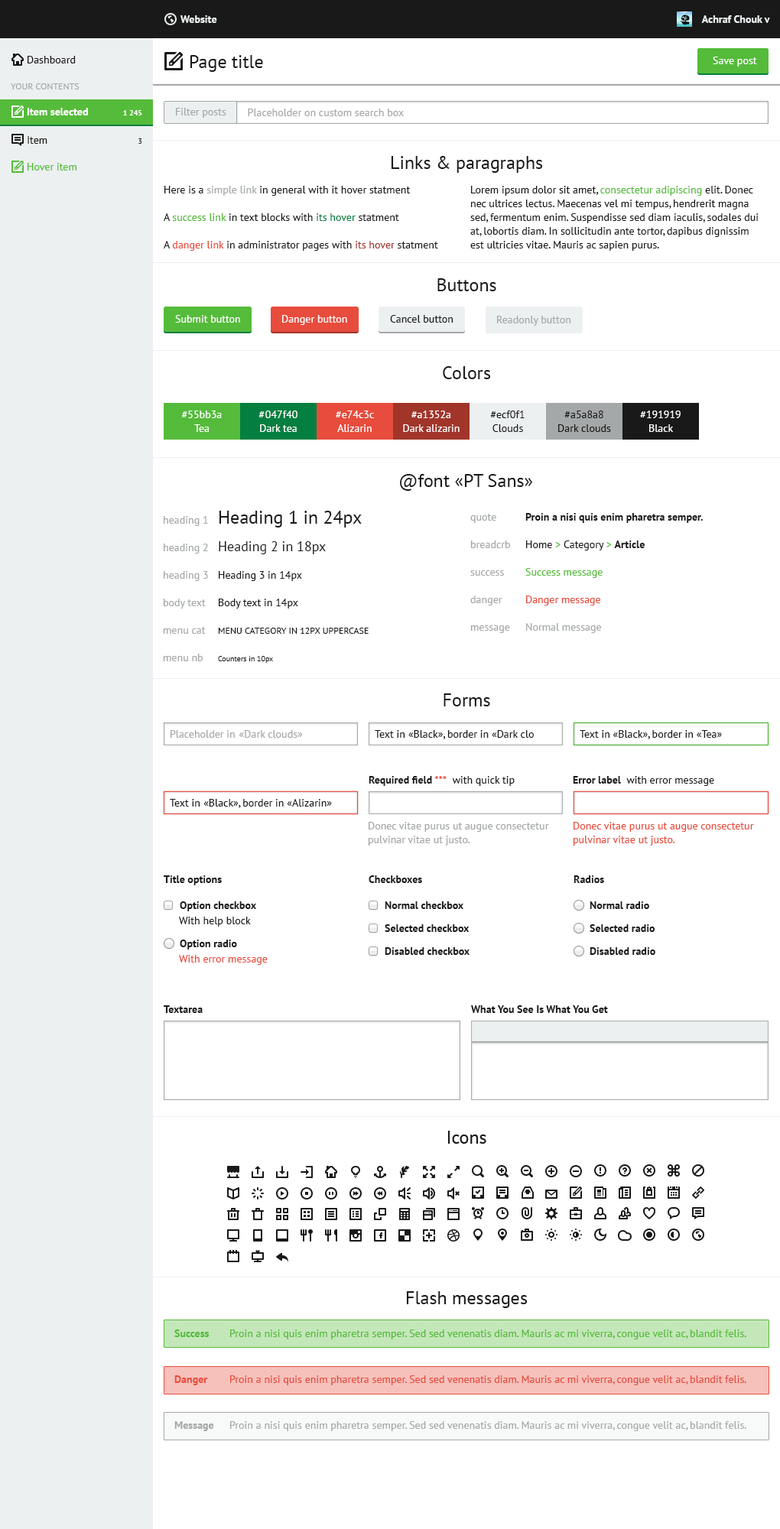
<style>
.page{position:relative;width:780px;height:1529px;background:#ffffff}
.page>*{position:absolute;margin:0}
.t1{font:10.7px "PTSans-Bold";color:#ecf0f1}
.t2{font:10.7px "PTSans-Regular";color:#191919}
.t3{font:18.3px "PTSans-Regular";color:#191919}
.t4{font:10.7px "PTSans-Regular";color:#ffffff}
.t5{font:9.2px "PTSans-Regular";color:#a5a8a8;text-transform:uppercase}
.t6{font:10.7px "PTSans-Bold";color:#ffffff}
.t7{font:7.6px "PTSans-Bold";color:#ffffff}
.t8{font:10.7px "PTSans-Regular";color:#a5a8a8}
.t9{font:7.6px "PTSans-Regular";color:#191919}
.t10{font:10.7px "PTSans-Regular";color:#55bb3a}
.t11{font:10.7px/13.8px "PTSans-Regular";color:#191919}
.t12{font:10.7px/13.8px "PTSans-Regular";color:#a5a8a8}
.t13{font:10.7px/13.8px "PTSans-Regular";color:#55bb3a}
.t14{font:10.7px/13.8px "PTSans-Regular";color:#047f40}
.t15{font:10.7px/13.8px "PTSans-Regular";color:#e74c3c}
.t16{font:10.7px/13.8px "PTSans-Regular";color:#a1352a}
.t17{font:10.7px/13.8px "PTSans-Regular";color:#ffffff}
.t18{font:9.2px/27.5px "PTSans-Regular";color:#191919;text-transform:uppercase}
.t19{font:10.7px/27.5px "PTSans-Regular";color:#a5a8a8}
.t20{font:18.3px/27.5px "PTSans-Regular";color:#191919}
.t21{font:13.8px/27.5px "PTSans-Regular";color:#191919}
.t22{font:10.7px/27.5px "PTSans-Regular";color:#191919}
.t23{font:7.6px/27.5px "PTSans-Regular";color:#191919}
.t24{font:10.7px/27.5px "PTSans-Bold";color:#191919}
.t25{font:10.7px/27.5px "PTSans-Regular";color:#55bb3a}
.t26{font:10.7px/27.5px "PTSans-Regular";color:#e74c3c}
.t27{font:10.7px "PTSans-Bold";color:#191919}
.t28{font:10.7px "PTSans-Bold";color:#e74c3c}
.t29{font:10.7px "PTSans-Regular";color:#e74c3c}
.t30{font:10.7px "PTSans-Bold";color:#55bb3a}
.t31{font:10.7px "PTSans-Bold";color:#a5a8a8}
</style>
<div class="page">
<p class="t1" style="left:180px;top:15px;width:37px;height:8px">Website</p>
<p class="t1" style="left:701px;top:15px;width:69px;height:8px">Achraf Chouk v</p>
<p class="t2" style="left:28px;top:56px;width:48px;height:7px">Dashboard</p>
<p class="t3" style="left:190px;top:55px;width:73px;height:17px">Page title</p>
<p class="t4" style="left:713px;top:57px;width:44px;height:10px">Save post</p>
<p class="t5" style="left:11px;top:83px;width:69px;height:6px">Your contents</p>
<p class="t6" style="left:27px;top:108px;width:61px;height:7px">Item selected</p>
<p class="t7" style="left:123px;top:110px;width:19px;height:5px">1 245</p>
<p class="t8" style="left:176px;top:108px;width:50px;height:10px">Filter posts</p>
<p class="t8" style="left:248px;top:109px;width:156px;height:7px">Placeholder on custom search box</p>
<p class="t2" style="left:28px;top:136px;width:19px;height:8px">Item</p>
<p class="t9" style="left:138px;top:138px;width:4px;height:6px">3</p>
<p class="t3" style="left:391px;top:156px;width:152px;height:17px">Links &amp; paragraphs</p>
<p class="t10" style="left:28px;top:163px;width:48px;height:7px">Hover item</p>
<p class="t11" style="left:164px;top:186px;width:274px;height:65px">Here is a <span class="t12">simple link</span> in general with it hover statment<br><br>A <span class="t13">success link</span> in text blocks with <span class="t14">its hover</span> statment<br><br>A <span class="t15">danger link</span> in administrator pages with <span class="t16">its hover</span> statment</p>
<p class="t11" style="left:470px;top:186px;width:288px;height:65px">Lorem ipsum dolor sit amet, <span class="t13">consectetur adipiscing</span> elit. Donec nec ultrices lectus. Maecenas vel mi tempus, hendrerit magna sed, fermentum enim. Suspendisse sed diam iaculis, sodales dui at, lobortis diam. In sollicitudin ante tortor, dapibus dignissim est ultricies vitae. Mauris ac sapien purus.</p>
<p class="t3" style="left:437px;top:278px;width:59px;height:13px">Buttons</p>
<p class="t4" style="left:175px;top:315px;width:65px;height:8px">Submit button</p>
<p class="t4" style="left:282px;top:315px;width:65px;height:10px">Danger button</p>
<p class="t2" style="left:390px;top:315px;width:63px;height:8px">Cancel button</p>
<p class="t8" style="left:497px;top:316px;width:74px;height:10px">Readonly button</p>
<p class="t3" style="left:443px;top:366px;width:48px;height:13px">Colors</p>
<p class="t17" style="left:182px;top:411px;width:40px;height:21px;text-align:center">#55bb3a<br>Tea</p>
<p class="t17" style="left:258px;top:411px;width:39px;height:21px;text-align:center">#047f40<br>Dark tea</p>
<p class="t17" style="left:336px;top:411px;width:38px;height:21px;text-align:center">#e74c3c<br>Alizarin</p>
<p class="t17" style="left:403px;top:411px;width:56px;height:21px;text-align:center">#a1352a<br>Dark alizarin</p>
<p class="t11" style="left:490px;top:411px;width:34px;height:21px;text-align:center">#ecf0f1<br>Clouds</p>
<p class="t11" style="left:558px;top:411px;width:53px;height:21px;text-align:center">#a5a8a8<br>Dark clouds</p>
<p class="t17" style="left:640px;top:411px;width:40px;height:21px;text-align:center">#191919<br>Black</p>
<p class="t3" style="left:400px;top:474px;width:132px;height:17px">@font «PT Sans»</p>
<p class="t18" style="left:163px;top:511px;width:206px;height:152px"><span class="t19">heading 1</span><span class="t20"> Heading 1 in 24px<br></span><span class="t19">heading 2</span><span class="t21"> Heading 2 in 18px<br></span><span class="t19">heading 3</span><span class="t22"> Heading 3 in 14px<br></span><span class="t19">body text</span><span class="t22"> Body text in 14px<br></span><span class="t19">menu cat </span>Menu category in 12px uppercase<br><span class="t19">menu nb </span><span class="t23">Counters in 10px</span></p>
<p class="t24" style="left:470px;top:513px;width:233px;height:120px"><span class="t19">quote  </span>Proin a nisi quis enim pharetra semper.<br><span class="t19">breadcrb</span><span class="t22"> Home </span><span class="t25">&gt;</span><span class="t22"> Category </span><span class="t25">&gt; </span>Article<br><span class="t19">success </span><span class="t25">Success message<br></span><span class="t19">danger </span><span class="t26">Danger message<br></span><span class="t19">message Normal message</span></p>
<p class="t3" style="left:443px;top:693px;width:47px;height:13px">Forms</p>
<p class="t8" style="left:170px;top:730px;width:133px;height:8px">Placeholder in «Dark clouds»</p>
<p class="t2" style="left:375px;top:730px;width:159px;height:9px">Text in «Black», border in «Dark clo</p>
<p class="t2" style="left:580px;top:730px;width:142px;height:9px">Text in «Black», border in «Tea»</p>
<p class="t27" style="left:369px;top:776px;width:146px;height:10px">Required field <span class="t28">***</span><span class="t2">  with quick tip</span></p>
<p class="t2" style="left:573px;top:776px;width:141px;height:10px"><span class="t27">Error label</span>  with error message</p>
<p class="t2" style="left:170px;top:799px;width:162px;height:9px">Text in «Black», border in «Alizarin»</p>
<p class="t12" style="left:368px;top:822px;width:181px;height:24px">Donec vitae purus ut augue consectetur<br>pulvinar vitae ut justo.</p>
<p class="t15" style="left:573px;top:822px;width:181px;height:24px">Donec vitae purus ut augue consectetur<br>pulvinar vitae ut justo.</p>
<p class="t27" style="left:164px;top:875px;width:58px;height:10px">Title options</p>
<p class="t27" style="left:369px;top:875px;width:53px;height:8px">Checkboxes</p>
<p class="t27" style="left:573px;top:875px;width:31px;height:8px">Radios</p>
<p class="t27" style="left:180px;top:901px;width:76px;height:10px">Option checkbox</p>
<p class="t27" style="left:385px;top:901px;width:78px;height:8px">Normal checkbox</p>
<p class="t27" style="left:589px;top:901px;width:60px;height:8px">Normal radio</p>
<p class="t2" style="left:179px;top:917px;width:72px;height:10px">With help block</p>
<p class="t27" style="left:385px;top:924px;width:84px;height:8px">Selected checkbox</p>
<p class="t27" style="left:589px;top:924px;width:66px;height:8px">Selected radio</p>
<p class="t27" style="left:180px;top:940px;width:57px;height:10px">Option radio</p>
<p class="t27" style="left:385px;top:947px;width:84px;height:8px">Disabled checkbox</p>
<p class="t27" style="left:589px;top:947px;width:66px;height:8px">Disabled radio</p>
<p class="t29" style="left:179px;top:955px;width:89px;height:10px">With error message</p>
<p class="t27" style="left:164px;top:1005px;width:39px;height:8px">Textarea</p>
<p class="t27" style="left:471px;top:1005px;width:137px;height:8px">What You See Is What You Get</p>
<p class="t3" style="left:447px;top:1131px;width:39px;height:13px">Icons</p>
<p class="t3" style="left:406px;top:1291px;width:122px;height:17px">Flash messages</p>
<p class="t10" style="left:174px;top:1330px;width:572px;height:9px"><span class="t30">Success </span>Proin a nisi quis enim pharetra semper. Sed sed venenatis diam. Mauris ac mi viverra, congue velit ac, blandit felis.</p>
<p class="t29" style="left:174px;top:1375px;width:572px;height:10px"><span class="t28">Danger</span> Proin a nisi quis enim pharetra semper. Sed sed venenatis diam. Mauris ac mi viverra, congue velit ac, blandit felis.</p>
<p class="t8" style="left:174px;top:1421px;width:572px;height:10px"><span class="t31">Message</span> Proin a nisi quis enim pharetra semper. Sed sed venenatis diam. Mauris ac mi viverra, congue velit ac, blandit felis.</p>
</div>
